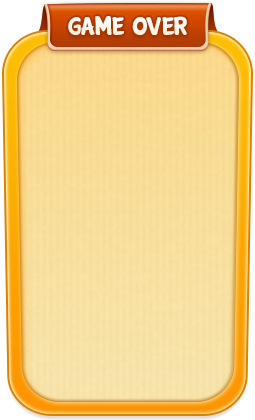
<style>
.page{position:relative;width:255px;height:420px}
.page>*{position:absolute;margin:0}
.t1{font:26px "Cartwheel";color:#ffffff}
</style>
<div class="page">
<p class="t1" style="left:68px;top:16px;width:119px;height:19px">GAME OVER</p>
</div>
